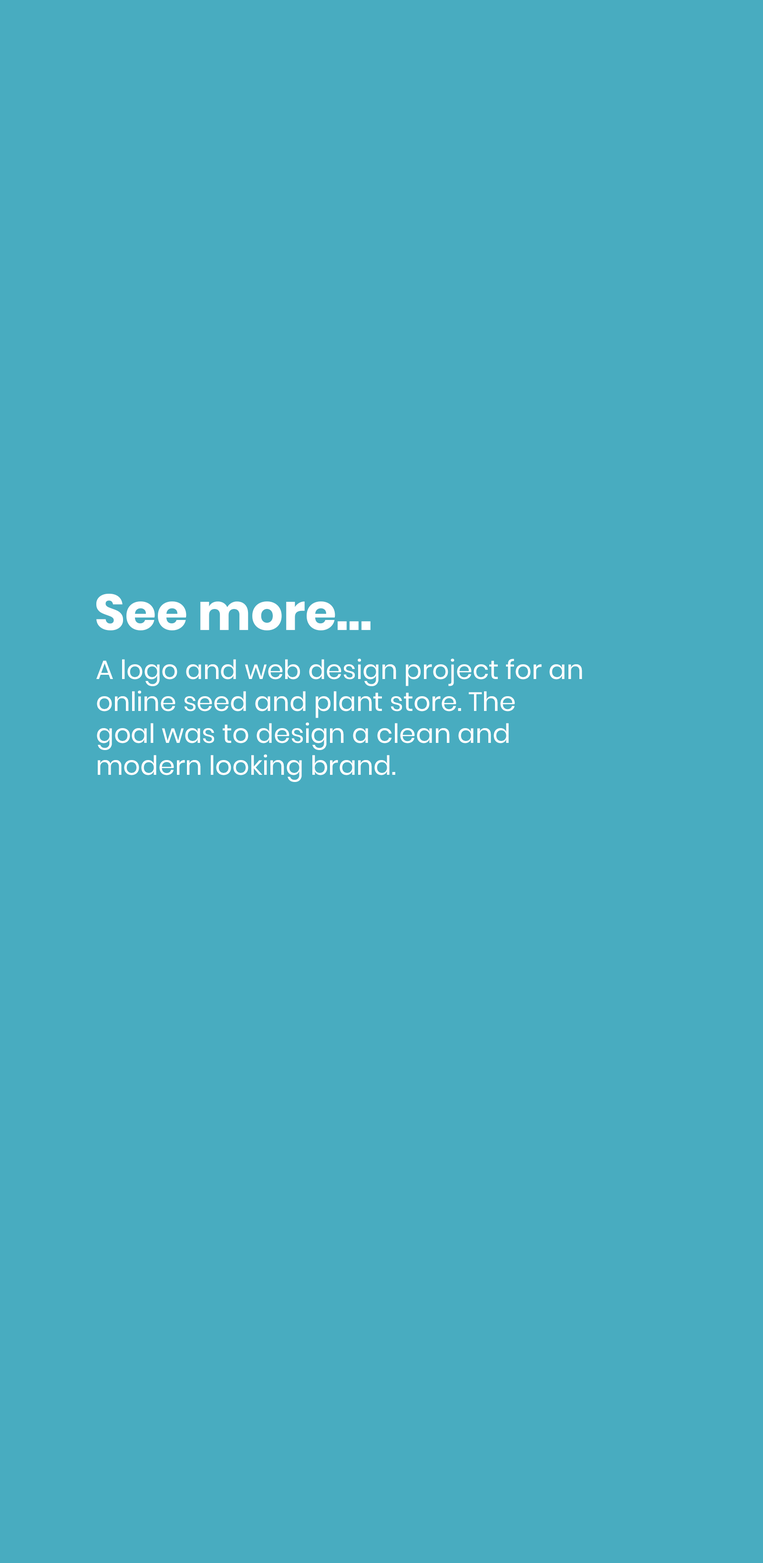
<style>
.page{position:relative;width:763px;height:1563px;background:#48acc0}
.page>*{position:absolute;margin:0}
.t1{font:50.4px "Poppins-Bold";color:#ffffff}
.t2{font:26.6px "Poppins-Regular";color:#ffffff}
</style>
<div class="page">
<p class="t1" style="left:96px;top:594px;width:274px;height:37px">See more...</p>
<p class="t2" style="left:96px;top:659px;width:486px;height:123px">A logo and web design project for an<br>online seed and plant store. The<br>goal was to design a clean and<br>modern looking brand.</p>
</div>
